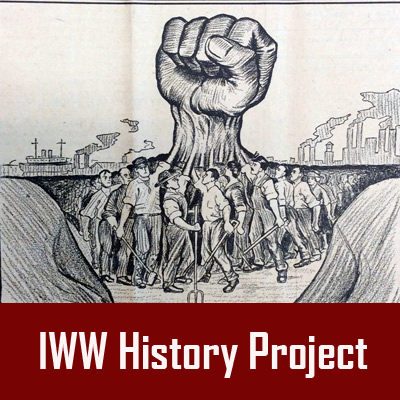
<style>
.page{position:relative;width:400px;height:400px;background:#770303}
.page>*{position:absolute;margin:0}
.t1{font:48px "AgencyFB-Bold";color:#fbf5f5}
</style>
<div class="page">
<p class="t1" style="left:40px;top:332px;width:328px;height:46px">IWW History Project</p>
</div>
